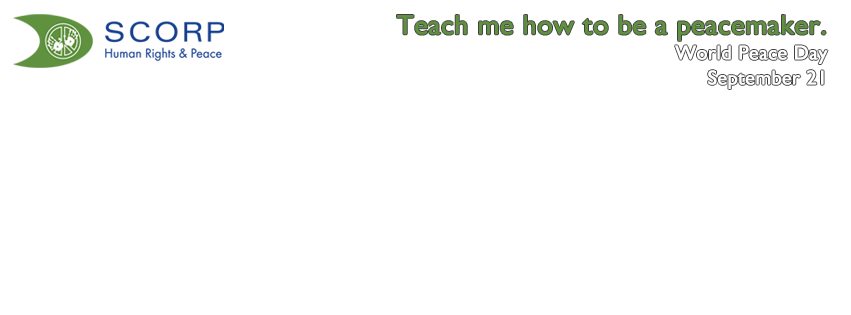
<style>
.page{position:relative;width:851px;height:315px;background:#ffffff}
.page>*{position:absolute;margin:0}
.t1{font:28px "GillSansMT";color:#5f913f;font-weight:bold}
.t2{font:20px/25px "GillSansMT";color:#ffffff;font-weight:bold}
</style>
<div class="page">
<p class="t1" style="left:397px;top:15px;width:431px;height:74px;text-align:right">Teach me how to be a peacemaker.<br><span class="t2">World Peace Day<br>September 21</span></p>
</div>
